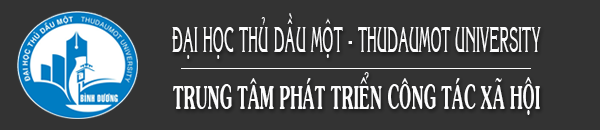
<style>
.page{position:relative;width:600px;height:130px;background:#333333}
.page>*{position:absolute;margin:0}
.t1{font:35.7px "VNI-Korin";color:#fcfcfd;scale:0.4 1}
.t2{font:32.1px "VNI-Souvir-Bold";color:#fcfcfd;scale:0.48 1}
</style>
<div class="page">
<p class="t1" style="left:172px;top:13px;width:369px;height:46px">ÑAÏI HOÏC THUÛ DAÀU MOÄT - THUDAUMOT UNIVERSITY</p>
<p class="t2" style="left:173px;top:72px;width:367px;height:43px">TRUNG TAÂM PHAÙT TRIEÅN COÂNG TAÙC XAÕ HOÄI</p>
</div>
